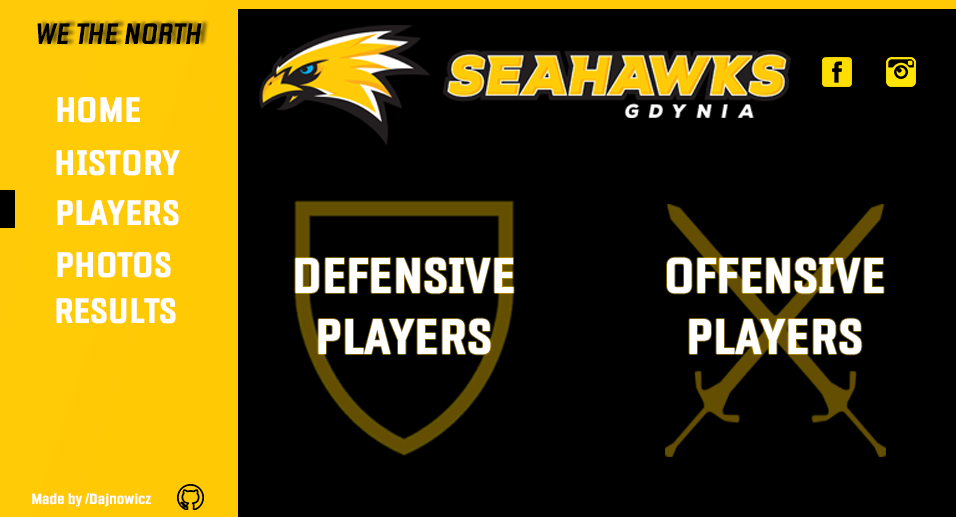
<style>
.page{position:relative;width:956px;height:517px;background:#000000}
.page>*{position:absolute;margin:0}
.t1{font:30px "Fragua-BoldItalic";color:#000000}
.t2{font:36px "Fragua-Bold";color:#ffffff}
.t3{font:51px "Fragua-Bold";color:#ffffff}
.t4{font:15px "Fragua-Bold";color:#ffffff}
</style>
<div class="page">
<p class="t1" style="left:37px;top:23px;width:165px;height:21px">WE THE NORTH</p>
<p class="t2" style="left:57px;top:97px;width:83px;height:26px">HOME</p>
<p class="t2" style="left:56px;top:150px;width:124px;height:26px">HISTORY</p>
<p class="t2" style="left:57px;top:200px;width:122px;height:26px">PLAYERS</p>
<p class="t2" style="left:57px;top:252px;width:114px;height:26px">PHOTOS</p>
<p class="t3" style="left:295px;top:257px;width:219px;height:98px;text-align:center">DEFENSIVE<br>PLAYERS</p>
<p class="t3" style="left:667px;top:257px;width:217px;height:98px;text-align:center">OFFENSIVE<br>PLAYERS</p>
<p class="t2" style="left:56px;top:298px;width:120px;height:26px">RESULTS</p>
<p class="t4" style="left:32px;top:493px;width:119px;height:14px">Made by /Dajnowicz</p>
</div>
